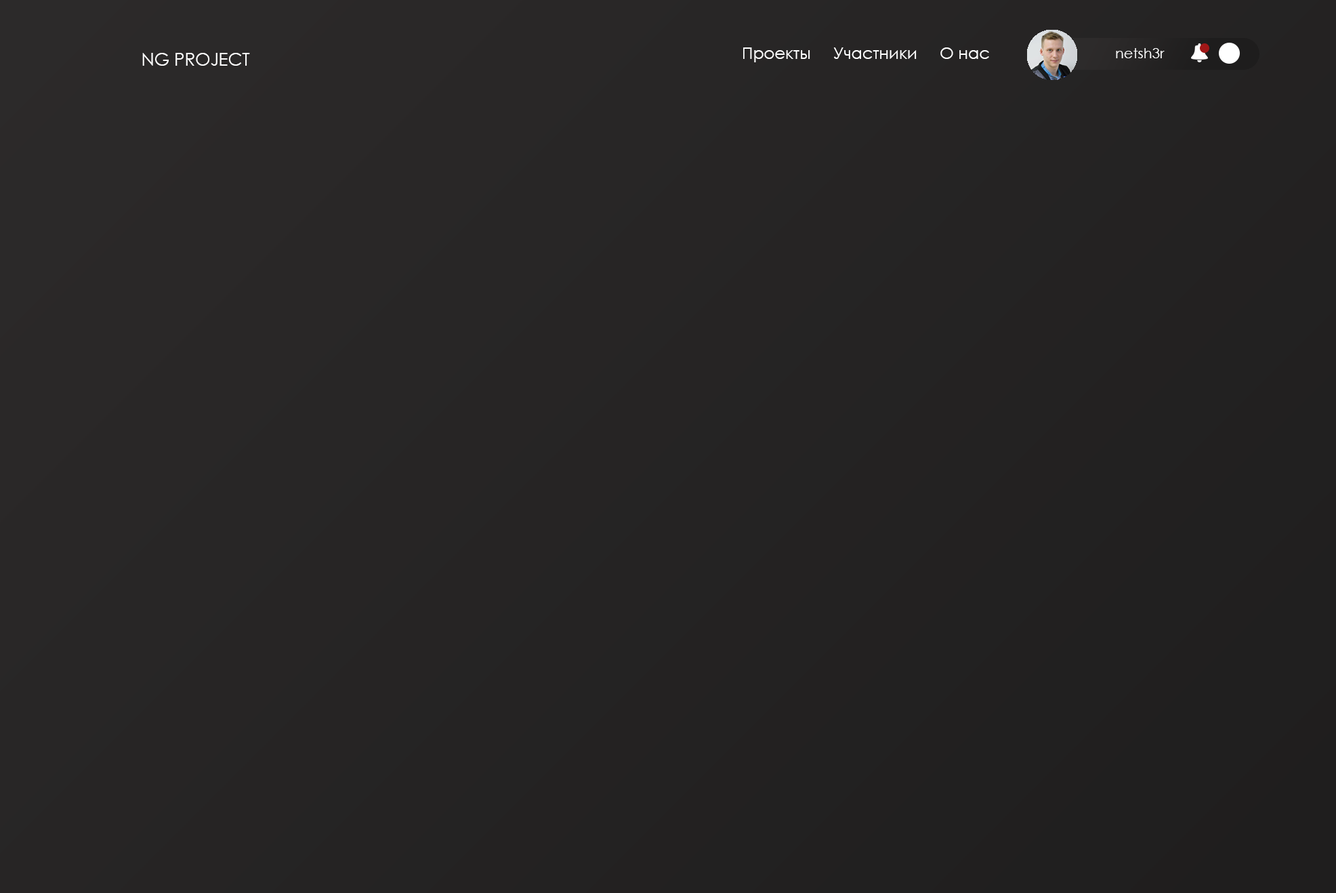
<style>
.page{position:relative;width:1336px;height:893px}
.page>*{position:absolute;margin:0}
.t1{font:17.4px "CenturyGothic";color:#ffffff}
.t2{font:16.3px "CenturyGothic";color:#ffffff}
.t3{font:14.2px "CenturyGothic";color:#ffffff}
</style>
<div class="page">
<p class="t1" style="left:142px;top:53px;width:108px;height:13px">NG PROJECT</p>
<p class="t2" style="left:743px;top:47px;width:246px;height:15px">Проекты     Участники     О нас</p>
<p class="t3" style="left:1116px;top:48px;width:48px;height:10px">netsh3r</p>
</div>
